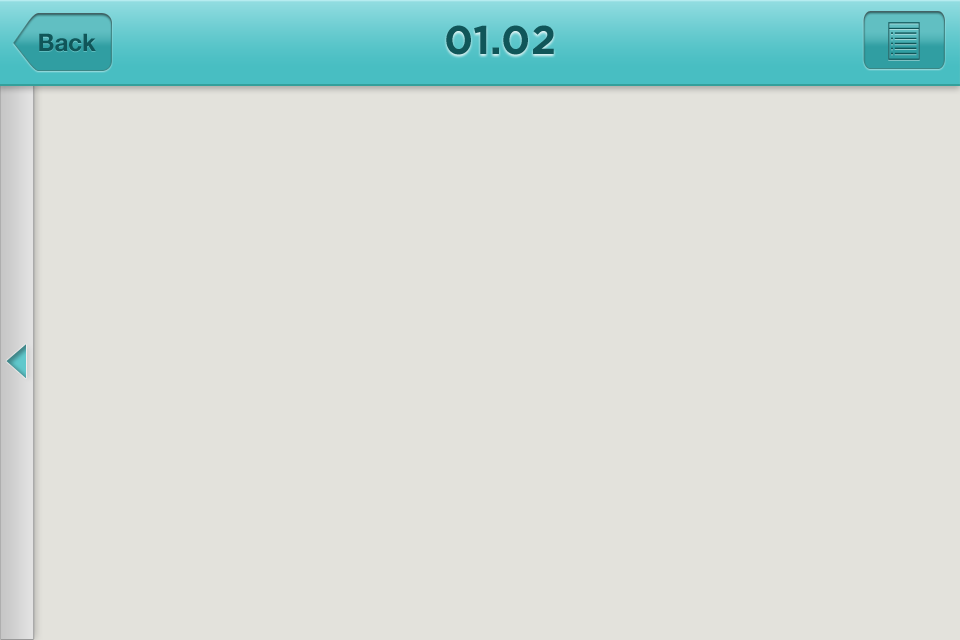
<style>
.page{position:relative;width:960px;height:640px;background:#e3e2dc}
.page>*{position:absolute;margin:0}
.t1{font:40px "Gotham-Bold";color:#105659}
.t2{font:24px "HelveticaNeue-Bold";color:#105659}
</style>
<div class="page">
<p class="t1" style="left:446px;top:25px;width:108px;height:30px">01.02</p>
<p class="t2" style="left:39px;top:33px;width:57px;height:19px">Back</p>
</div>
